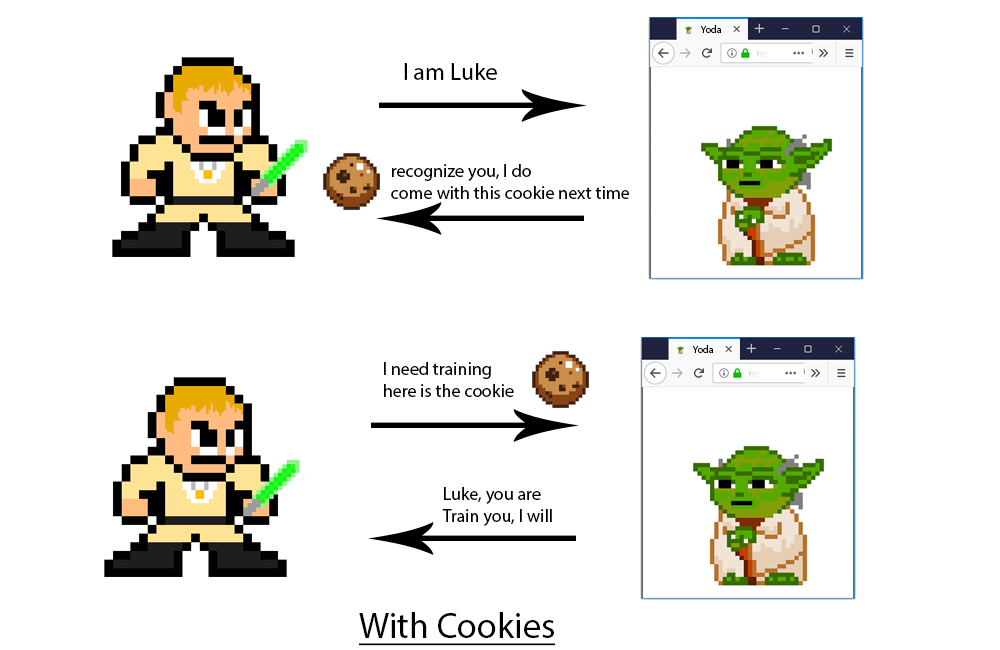
<style>
.page{position:relative;width:1000px;height:650px;background:#ffffff}
.page>*{position:absolute;margin:0}
.t1{font:10px "MyriadPro-Regular";color:#000000}
.t2{font:24px "MyriadPro-Regular";color:#000000}
.t3{font:18px "MyriadPro-Regular";color:#000000}
.t4{font:36px "MyriadPro-Regular";color:#000000;text-decoration:underline}
</style>
<div class="page">
<p class="t1" style="left:700px;top:25px;width:21px;height:8px">Yoda</p>
<p class="t2" style="left:404px;top:63px;width:93px;height:17px">I am Luke</p>
<p class="t3" style="left:391px;top:164px;width:238px;height:35px">recognize you, I do<br>come with this cookie next time</p>
<p class="t1" style="left:692px;top:345px;width:21px;height:8px">Yoda</p>
<p class="t3" style="left:384px;top:362px;width:130px;height:35px">I need training<br>here is the cookie</p>
<p class="t3" style="left:442px;top:487px;width:110px;height:39px">Luke, you are<br>Train you, I will</p>
<p class="t4" style="left:359px;top:612px;width:197px;height:34px">With Cookies</p>
</div>
